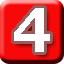
<style>
.page{position:relative;width:64px;height:64px;background:#f70909}
.page>*{position:absolute;margin:0}
.t1{font:60px "Meiryo-Bold";color:#ffffff}
</style>
<div class="page">
<p class="t1" style="left:14px;top:8px;width:36px;height:44px">4</p>
</div>
